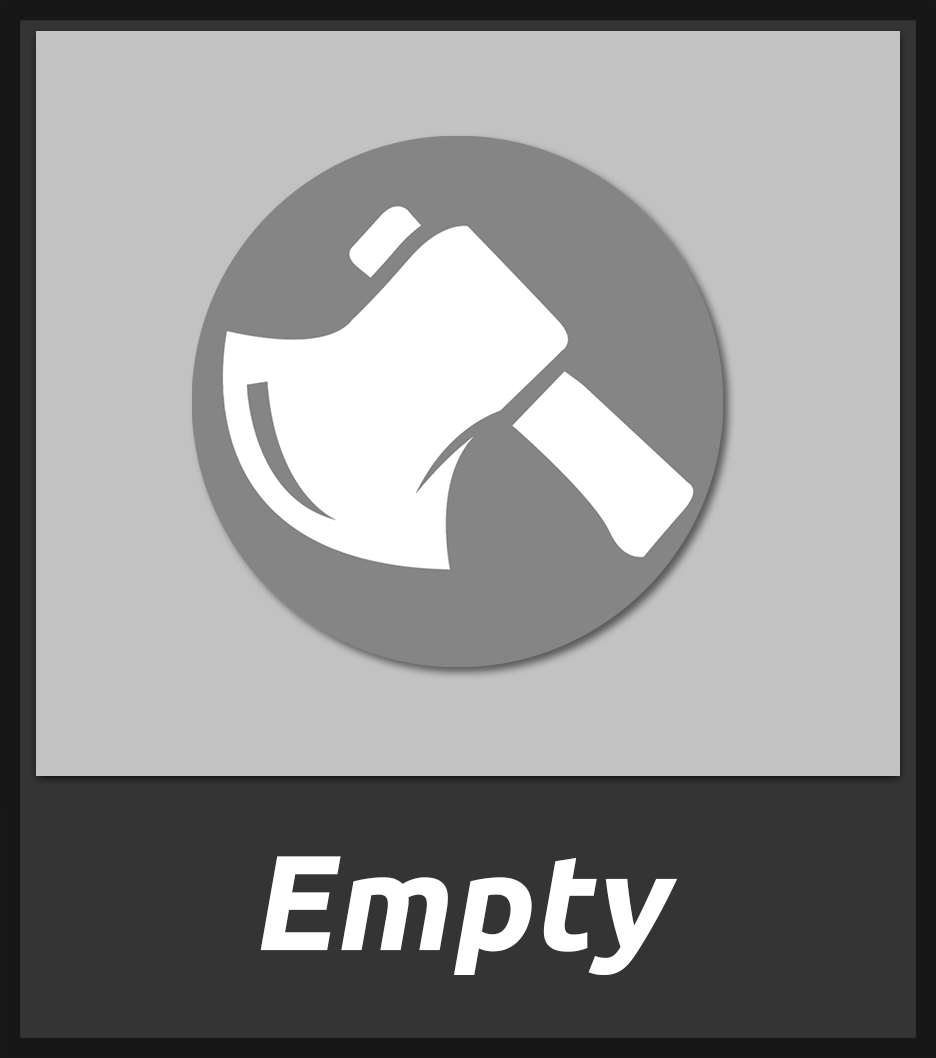
<style>
.page{position:relative;width:936px;height:1058px;background:#c2c2c2}
.page>*{position:absolute;margin:0}
.t1{font:135.4px "Ubuntu-Bold";color:#ffffff;font-style:italic}
</style>
<div class="page">
<p class="t1" style="left:260px;top:856px;width:418px;height:119px">Empty</p>
</div>
